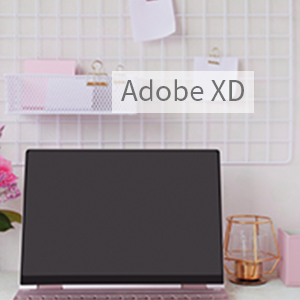
<style>
.page{position:relative;width:300px;height:300px}
.page>*{position:absolute;margin:0}
.t1{font:27.8px "SourceHanSansJP-Regular";color:#727171}
</style>
<div class="page">
<p class="t1" style="left:121px;top:79px;width:123px;height:22px">Adobe XD</p>
</div>
